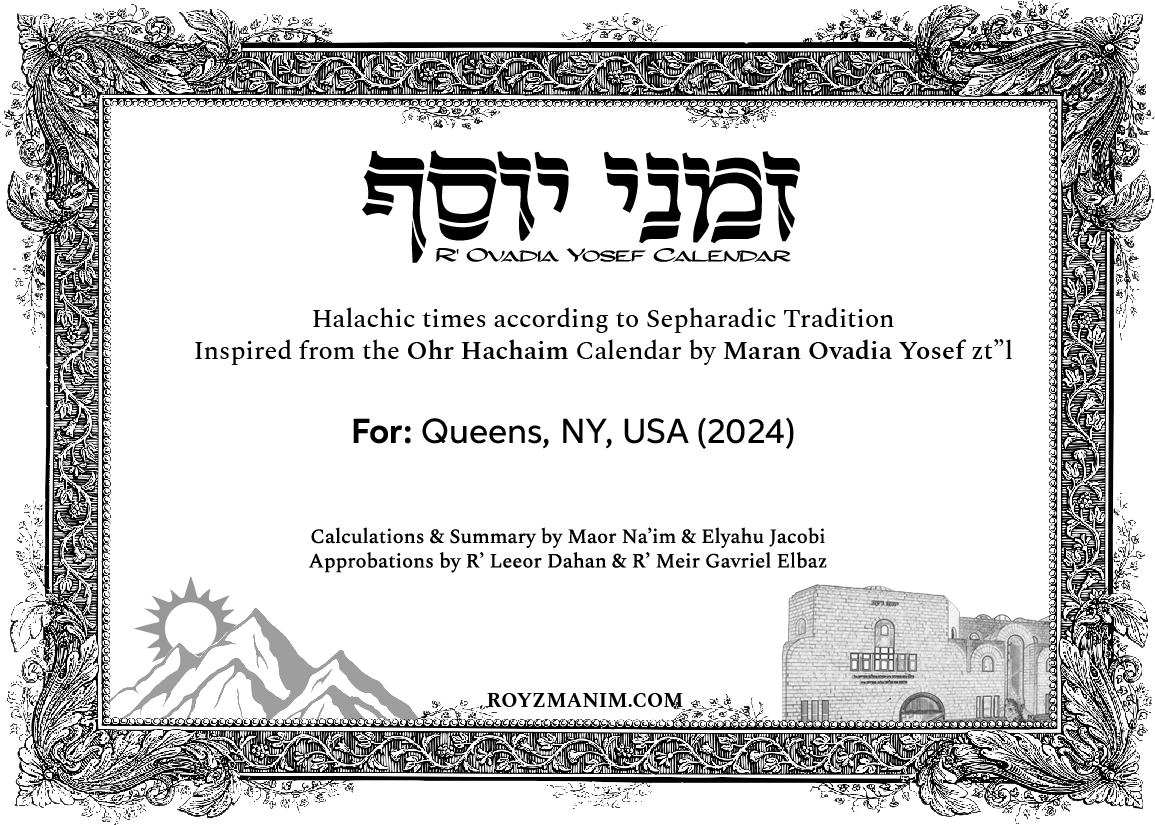
<style>
.page{position:relative;width:1155px;height:825px;background:#ffffff}
.page>*{position:absolute;margin:0}
.t1{font:140px "GuttmanMantovaDecor";letter-spacing:-0.05em;color:#000000}
.t2{font:17.5px "Javar-Regular";letter-spacing:-0.05em;color:#000000}
.t3{font:17.5px "MyriadPro-Regular";letter-spacing:-0.05em;color:#000000}
.t4{font:26.2px "Spectral-Medium";color:#000000}
.t5{font:26.2px "Spectral-SemiBold";color:#000000}
.t6{font:35px "Neutro-Medium";color:#000000}
.t7{font:35px "Neutro-Bold";color:#000000}
.t8{font:20.4px "Spectral-Medium";color:#000000}
.t9{font:20.4px "Spectral-Bold";color:#000000}
</style>
<div class="page">
<p class="t1" style="left:362px;top:150px;width:438px;height:113px">זמני יוסף</p>
<p class="t2" style="left:435px;top:248px;width:356px;height:14px">R<span class="t3">'</span> Ovadia Yosef Calendar</p>
<p class="t4" style="left:195px;top:307px;width:817px;height:58px;text-align:center">Halachic times according to Sepharadic Tradition<br>Inspired from the <span class="t5">Ohr Hachaim</span> Calendar by <span class="t5">Maran Ovadia Yosef</span> zt”l</p>
<p class="t6" style="left:353px;top:417px;width:441px;height:32px"><span class="t7">For: </span>Queens, NY, USA (2024)</p>
<p class="t8" style="left:309px;top:527px;width:518px;height:46px;text-align:center">Calculations &amp; Summary by Maor Na’im &amp; Elyahu Jacobi<br>Approbations by R’ Leeor Dahan &amp; R’ Meir Gavriel Elbaz</p>
<p class="t9" style="left:487px;top:693px;width:196px;height:14px">ROYZMANIM.COM</p>
</div>
